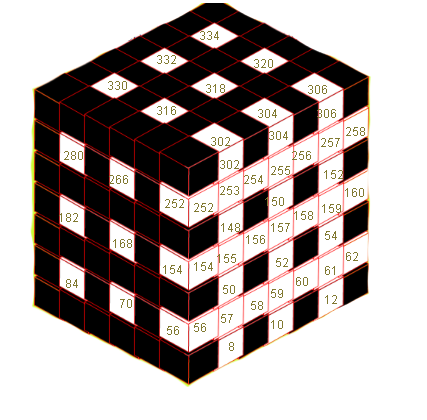
<style>
.page{position:relative;width:427px;height:420px;background:#ffffff}
.page>*{position:absolute;margin:0}
.t1{font:12px "ArialMT";color:#817931}
</style>
<div class="page">
<p class="t1" style="left:200px;top:31px;width:19px;height:9px">334</p>
<p class="t1" style="left:157px;top:55px;width:19px;height:9px">332</p>
<p class="t1" style="left:254px;top:59px;width:19px;height:9px">320</p>
<p class="t1" style="left:108px;top:81px;width:19px;height:9px">330</p>
<p class="t1" style="left:206px;top:84px;width:19px;height:9px">318</p>
<p class="t1" style="left:308px;top:85px;width:19px;height:9px">306</p>
<p class="t1" style="left:157px;top:106px;width:19px;height:9px">316</p>
<p class="t1" style="left:258px;top:109px;width:19px;height:9px">304</p>
<p class="t1" style="left:317px;top:109px;width:19px;height:9px">306</p>
<p class="t1" style="left:211px;top:137px;width:19px;height:9px">302</p>
<p class="t1" style="left:269px;top:131px;width:19px;height:9px">304</p>
<p class="t1" style="left:346px;top:127px;width:19px;height:9px">258</p>
<p class="t1" style="left:321px;top:138px;width:19px;height:9px">257</p>
<p class="t1" style="left:64px;top:151px;width:19px;height:9px">280</p>
<p class="t1" style="left:220px;top:160px;width:19px;height:9px">302</p>
<p class="t1" style="left:292px;top:151px;width:19px;height:9px">256</p>
<p class="t1" style="left:271px;top:166px;width:19px;height:9px">255</p>
<p class="t1" style="left:324px;top:170px;width:19px;height:9px">152</p>
<p class="t1" style="left:109px;top:175px;width:19px;height:9px">266</p>
<p class="t1" style="left:244px;top:175px;width:19px;height:9px">254</p>
<p class="t1" style="left:220px;top:186px;width:19px;height:9px">253</p>
<p class="t1" style="left:265px;top:197px;width:19px;height:9px">150</p>
<p class="t1" style="left:345px;top:188px;width:19px;height:9px">160</p>
<p class="t1" style="left:165px;top:199px;width:19px;height:9px">252</p>
<p class="t1" style="left:194px;top:203px;width:19px;height:9px">252</p>
<p class="t1" style="left:322px;top:204px;width:19px;height:9px">159</p>
<p class="t1" style="left:59px;top:213px;width:19px;height:9px">182</p>
<p class="t1" style="left:294px;top:211px;width:19px;height:9px">158</p>
<p class="t1" style="left:221px;top:223px;width:19px;height:9px">148</p>
<p class="t1" style="left:271px;top:223px;width:19px;height:9px">157</p>
<p class="t1" style="left:325px;top:231px;width:12px;height:9px">54</p>
<p class="t1" style="left:113px;top:239px;width:19px;height:9px">168</p>
<p class="t1" style="left:246px;top:235px;width:19px;height:9px">156</p>
<p class="t1" style="left:217px;top:254px;width:19px;height:9px">155</p>
<p class="t1" style="left:346px;top:252px;width:12px;height:9px">62</p>
<p class="t1" style="left:163px;top:265px;width:19px;height:9px">154</p>
<p class="t1" style="left:194px;top:262px;width:19px;height:9px">154</p>
<p class="t1" style="left:276px;top:258px;width:12px;height:9px">52</p>
<p class="t1" style="left:325px;top:266px;width:10px;height:9px">61</p>
<p class="t1" style="left:66px;top:279px;width:12px;height:9px">84</p>
<p class="t1" style="left:296px;top:277px;width:12px;height:9px">60</p>
<p class="t1" style="left:223px;top:285px;width:12px;height:9px">50</p>
<p class="t1" style="left:271px;top:289px;width:12px;height:9px">59</p>
<p class="t1" style="left:120px;top:299px;width:12px;height:9px">70</p>
<p class="t1" style="left:251px;top:301px;width:12px;height:9px">58</p>
<p class="t1" style="left:325px;top:295px;width:12px;height:9px">12</p>
<p class="t1" style="left:221px;top:314px;width:12px;height:9px">57</p>
<p class="t1" style="left:167px;top:326px;width:12px;height:9px">56</p>
<p class="t1" style="left:194px;top:323px;width:12px;height:9px">56</p>
<p class="t1" style="left:271px;top:320px;width:12px;height:9px">10</p>
<p class="t1" style="left:229px;top:342px;width:5px;height:9px">8</p>
</div>
